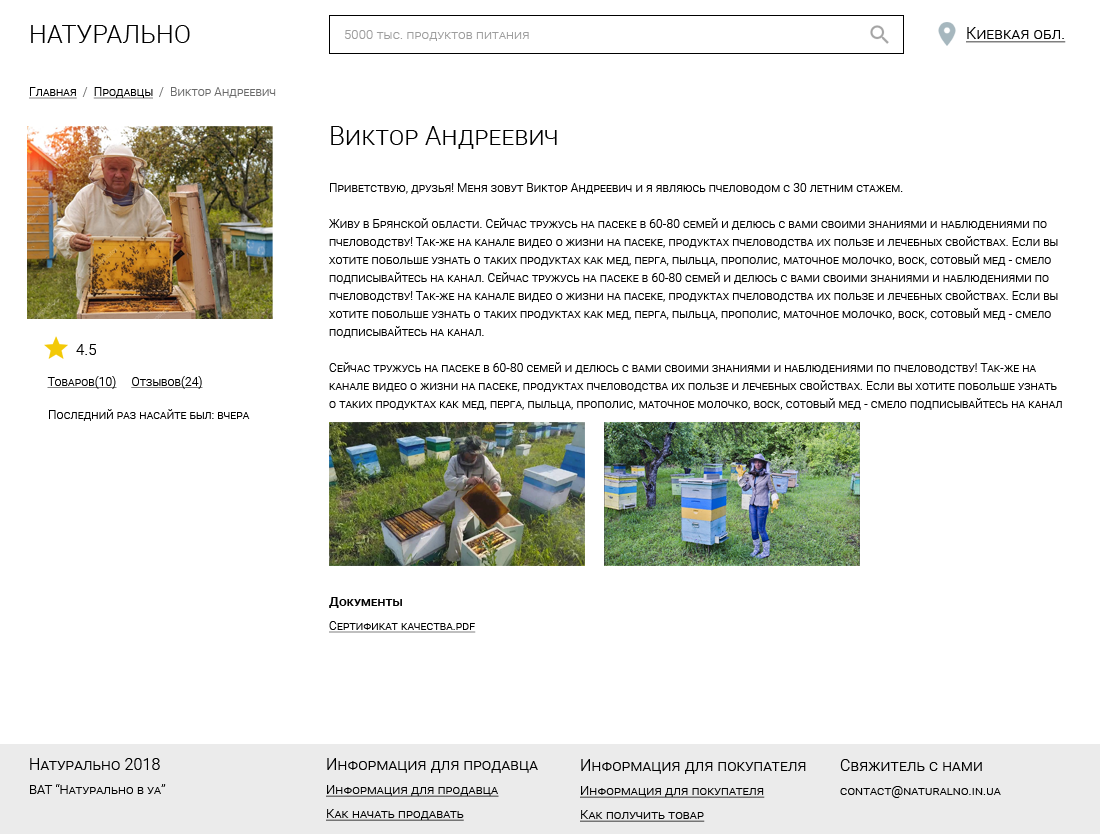
<style>
.page{position:relative;width:1100px;height:836px;background:#ffffff}
.page>*{position:absolute;margin:0}
.t1{font:25px "Roboto-Light";letter-spacing:0.01em;color:#000000;font-variant:small-caps}
.t2{font:13px "Roboto-Light";letter-spacing:0.01em;color:#9d9d9d;font-variant:small-caps}
.t3{font:16px "Roboto-Light";letter-spacing:0.01em;color:#000000;font-variant:small-caps;text-decoration:underline}
.t4{font:12px "Roboto-Light";letter-spacing:0.01em;color:#6a6a6a;font-variant:small-caps}
.t5{font:12px "Roboto-Light";letter-spacing:0.01em;color:#000000;font-variant:small-caps;text-decoration:underline}
.t6{font:26px "Roboto-Light";letter-spacing:0.01em;color:#000000;font-variant:small-caps}
.t7{font:12px/18px "Roboto-Light";letter-spacing:0.01em;color:#000000;font-variant:small-caps}
.t8{font:13px/18px "Roboto-Medium";letter-spacing:0.01em;color:#000000;font-variant:small-caps}
.t9{font:12px/6px "Roboto-Light";letter-spacing:0.01em;color:#000000;font-variant:small-caps;text-decoration:underline}
.t10{font:15px "Roboto-Light";letter-spacing:0.01em;color:#000000;font-variant:small-caps}
.t11{font:12px "Roboto-Light";letter-spacing:0.01em;color:#000000;font-variant:small-caps}
.t12{font:13px/24px "Roboto-Light";letter-spacing:0.01em;color:#000000;font-variant:small-caps}
.t13{font:16px/26px "Roboto-Light";letter-spacing:0.01em;color:#000000;font-variant:small-caps}
.t14{font:13px/24px "Roboto-Light";letter-spacing:0.01em;color:#000000;font-variant:small-caps;text-decoration:underline}
</style>
<div class="page">
<p class="t1" style="left:31px;top:25px;width:159px;height:18px">НАТУРАЛЬНО</p>
<p class="t2" style="left:344px;top:30px;width:185px;height:11px">5000 тыс. продуктов питания</p>
<p class="t3" style="left:966px;top:27px;width:100px;height:16px">Киевкая обл.</p>
<p class="t4" style="left:29px;top:87px;width:247px;height:12px"><span class="t5">Главная</span>  /  <span class="t5">Продавцы</span>  /  Виктор Андреевич</p>
<p class="t6" style="left:331px;top:126px;width:226px;height:23px">Виктор Андреевич</p>
<p class="t7" style="left:329px;top:183px;width:733px;height:450px">Приветствую, друзья! Меня зовут Виктор Андреевич и я являюсь пчеловодом с 30 летним стажем. <br><br>Живу в Брянской области. Сейчас тружусь на пасеке в 60-80 семей и делюсь с вами своими знаниями и наблюдениями по пчеловодству! Так-же на канале видео о жизни на пасеке, продуктах пчеловодства их пользе и лечебных свойствах. Если вы хотите побольше узнать о таких продуктах как мед, перга, пыльца, прополис, маточное молочко, воск, сотовый мед - смело подписывайтесь на канал. Сейчас тружусь на пасеке в 60-80 семей и делюсь с вами своими знаниями и наблюдениями по пчеловодству! Так-же на канале видео о жизни на пасеке, продуктах пчеловодства их пользе и лечебных свойствах. Если вы хотите побольше узнать о таких продуктах как мед, перга, пыльца, прополис, маточное молочко, воск, сотовый мед - смело подписывайтесь на канал.<br><br>Сейчас тружусь на пасеке в 60-80 семей и делюсь с вами своими знаниями и наблюдениями по пчеловодству! Так-же на канале видео о жизни на пасеке, продуктах пчеловодства их пользе и лечебных свойствах. Если вы хотите побольше узнать о таких продуктах как мед, перга, пыльца, прополис, маточное молочко, воск, сотовый мед - смело подписывайтесь на канал.<br><br><br><br><br><br><br><br><br><br><span class="t8">Документы<br><br></span><span class="t9">Сертификат качества.pdf</span></p>
<p class="t10" style="left:76px;top:344px;width:20px;height:11px">4.5</p>
<p class="t5" style="left:47px;top:376px;width:156px;height:13px">Товаров(10)     Отзывов(24)</p>
<p class="t11" style="left:49px;top:409px;width:201px;height:12px">Последний раз насайте был: вчера</p>
<p class="t12" style="left:30px;top:758px;width:136px;height:36px"><span class="t13">Натурально 2018<br></span>ВАТ “Натурально в уа”</p>
<p class="t14" style="left:326px;top:758px;width:212px;height:63px"><span class="t13">Информация для продавца<br></span>Информация для продавца<br>Как начать продавать</p>
<p class="t14" style="left:580px;top:759px;width:226px;height:63px"><span class="t13">Информация для покупателя<br></span>Информация для покупателя<br>Как получить товар</p>
<p class="t12" style="left:840px;top:759px;width:161px;height:39px"><span class="t13">Свяжитель с нами<br></span>contact@naturalno.in.ua</p>
</div>
